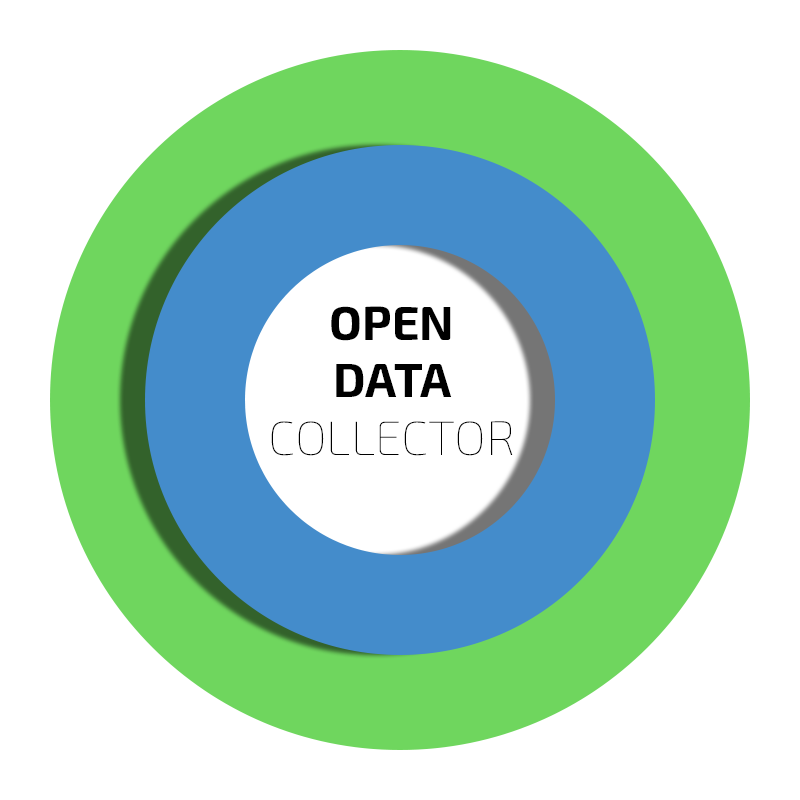
<style>
.page{position:relative;width:800px;height:800px;background:#ffffff}
.page>*{position:absolute;margin:0}
.t1{font:48px "Exo2-Bold";color:#000000}
.t2{font:48px "Exo2-Thin";color:#000000}
</style>
<div class="page">
<p class="t1" style="left:271px;top:306px;width:242px;height:150px;text-align:center">OPEN <br>DATA <br><span class="t2">COLLECTOR</span></p>
</div>
